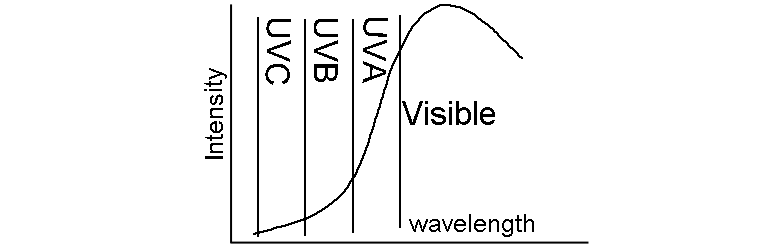
<style>
.page{position:relative;width:759px;height:248px;background:#ffffff}
.page>*{position:absolute;margin:0}
.t1{font:33.3px "ArialMT";color:#000000}
.t2{font:25px "ArialMT";color:#000000}
</style>
<div class="page">
<p class="t1" style="left:265px;top:19px;width:26px;height:66px;rotate:91deg">UVC</p>
<p class="t1" style="left:314px;top:19px;width:24px;height:63px;rotate:90deg">UVB</p>
<p class="t1" style="left:362px;top:18px;width:26px;height:65px;rotate:91deg">UVA</p>
<p class="t2" style="left:204px;top:68px;width:23px;height:91px;rotate:-90deg">Intensity</p>
<p class="t1" style="left:402px;top:101px;width:93px;height:24px">Visible</p>
<p class="t2" style="left:409px;top:214px;width:125px;height:23px">wavelength</p>
</div>
